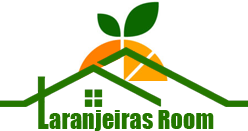
<style>
.page{position:relative;width:248px;height:131px;background:#ffffff}
.page>*{position:absolute;margin:0}
.t1{font:30.8px "Impact";color:#247700}
.t2{font:24.3px "Impact";color:#247700}
</style>
<div class="page">
<p class="t1" style="left:38px;top:104px;width:11px;height:25px">L</p>
<p class="t2" style="left:49px;top:110px;width:165px;height:21px">aranjeiras Room</p>
</div>
